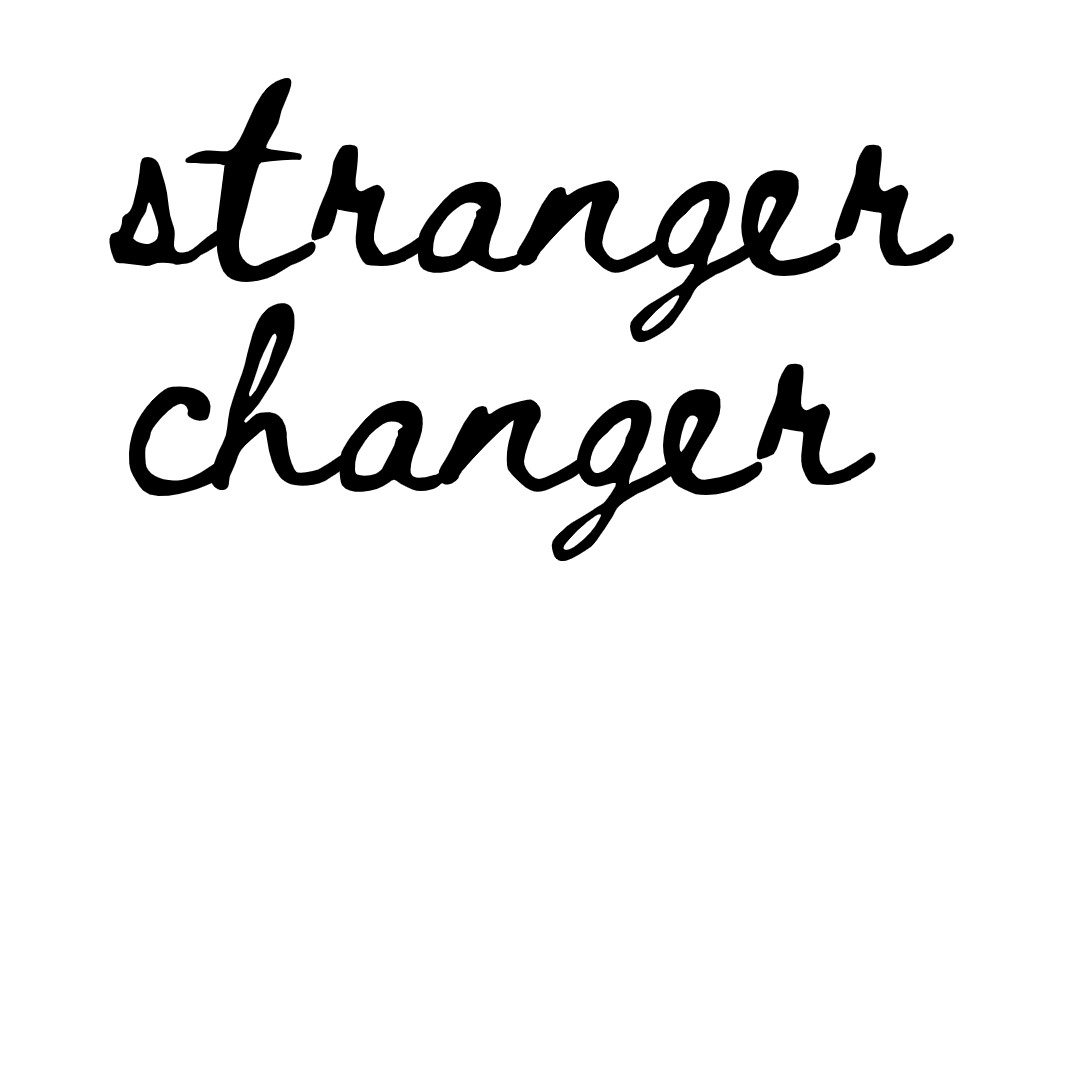
<style>
.page{position:relative;width:1080px;height:1080px;background:#ffffff}
.page>*{position:absolute;margin:0}
.t1{font:182.4px "BethEllen2Regular";color:#000000}
</style>
<div class="page">
<p class="t1" style="left:109px;top:78px;width:845px;height:483px">stranger<br>changer</p>
</div>
